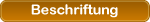
<style>
.page{position:relative;width:150px;height:22px}
.page>*{position:absolute;margin:0}
.t1{font:14px "ArialRoundedMTBold";color:#ffffff}
</style>
<div class="page">
<p class="t1" style="left:31px;top:4px;width:87px;height:14px">Beschriftung</p>
</div>
